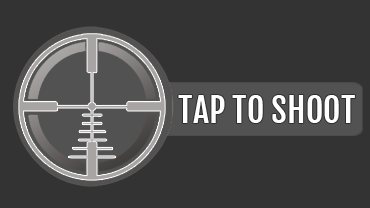
<style>
.page{position:relative;width:370px;height:208px;background:#333333}
.page>*{position:absolute;margin:0}
.t1{font:34px "FjallaOne-Regular";color:#ffffff}
</style>
<div class="page">
<p class="t1" style="left:178px;top:95px;width:177px;height:28px">TAP TO SHOOT</p>
</div>
